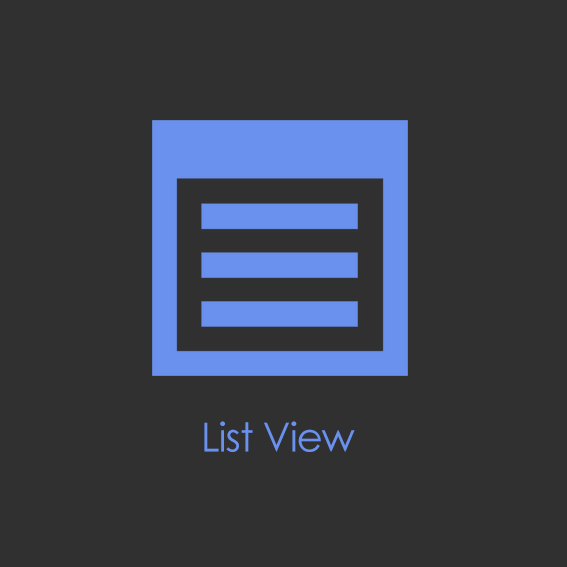
<style>
.page{position:relative;width:567px;height:567px;background:#303031}
.page>*{position:absolute;margin:0}
.t1{font:40px "CenturyGothic";letter-spacing:-0.025em;color:#6a91ed}
</style>
<div class="page">
<p class="t1" style="left:204px;top:421px;width:151px;height:31px">List View</p>
</div>
